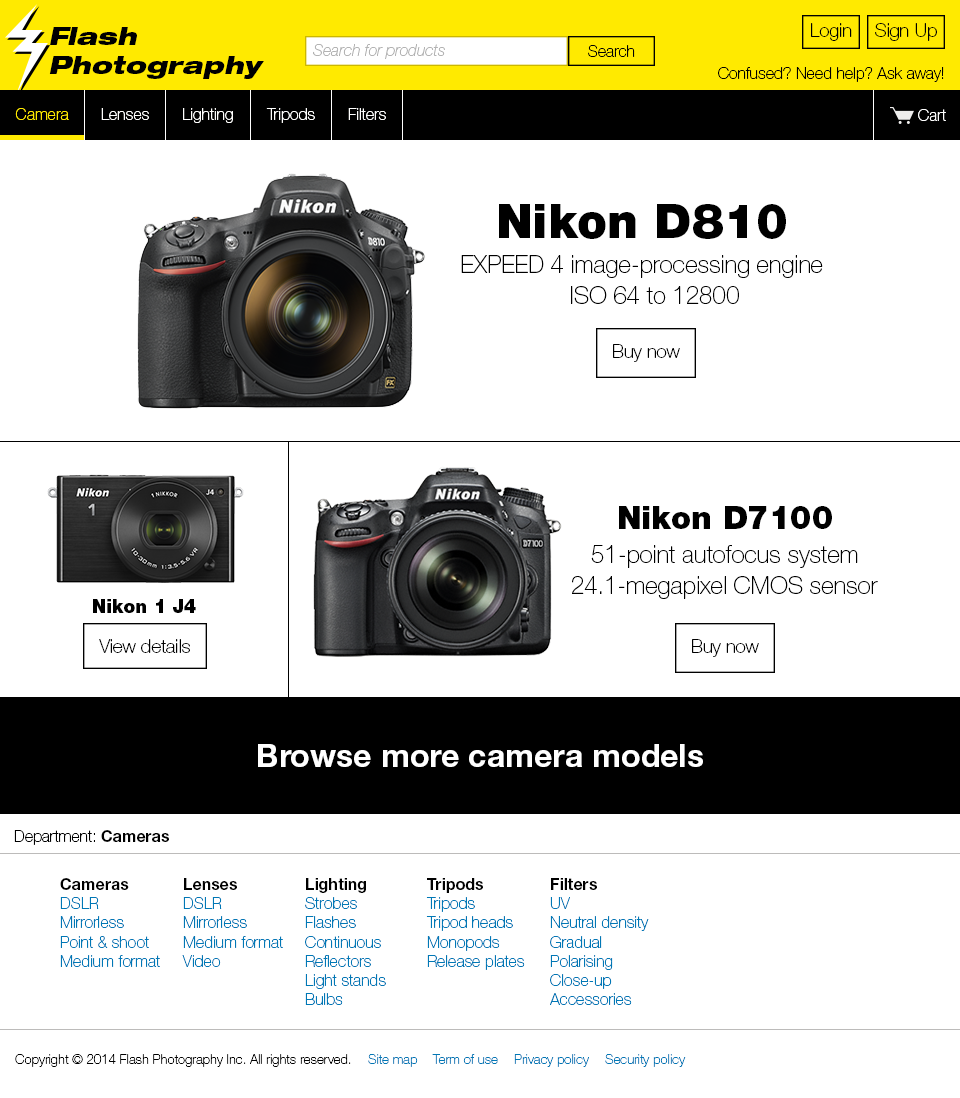
<style>
.page{position:relative;width:960px;height:1098px;background:#ffffff}
.page>*{position:absolute;margin:0}
.t1{font:24px "HelveticaNeueLTStd-BlkExO";color:#000000}
.t2{font:18.7px "HelveticaNeueLTStd-Th";color:#000000}
.t3{font:12px "HelveticaNeueLTStd-ThIt";color:#b3b3b3}
.t4{font:12px "HelveticaNeueLTStd-Th";color:#010101}
.t5{font:16px "HelveticaNeueLTStd-Th";color:#000000}
.t6{font:12px "HelveticaNeueLTStd-Th";color:#ffea00}
.t7{font:12px "HelveticaNeueLTStd-Th";color:#fffffe}
.t8{font:12px "HelveticaNeueLTStd-Th";color:#ffffff}
.t9{font:48px "HelveticaNeueLTStd-Blk";color:#000000}
.t10{font:24px "HelveticaNeueLTStd-Th";color:#000000}
.t11{font:32px "HelveticaNeueLTStd-Blk";color:#000000}
.t12{font:18.7px "HelveticaNeueLTStd-Blk";color:#000000}
.t13{font:32px "HelveticaNeueLTStd-Bd";color:#ffffff}
.t14{font:12px "HelveticaNeueLTStd-Th";color:#000000}
.t15{font:12px "HelveticaNeueLTStd-Bd";color:#000000}
.t16{font:16px "HelveticaNeueLTStd-Th";color:#0078b6}
.t17{font:16px "HelveticaNeueLTStd-Bd";color:#000000}
.t18{font:13.3px "HelveticaNeueLTStd-Th";color:#000000}
.t19{font:13.3px "HelveticaNeueLTStd-Th";color:#0078b6}
</style>
<div class="page">
<p class="t1" style="left:49px;top:27px;width:215px;height:52px">Flash<br>Photography</p>
<p class="t2" style="left:811px;top:23px;width:41px;height:18px">Login</p>
<p class="t2" style="left:875px;top:23px;width:62px;height:18px">Sign Up</p>
<p class="t3" style="left:313px;top:44px;width:132px;height:15px">Search for products</p>
<p class="t4" style="left:588px;top:45px;width:47px;height:12px">Search</p>
<p class="t5" style="left:718px;top:67px;width:226px;height:15px">Confused? Need help? Ask away!</p>
<p class="t6" style="left:15px;top:108px;width:54px;height:12px">Camera</p>
<p class="t7" style="left:101px;top:108px;width:48px;height:12px">Lenses</p>
<p class="t7" style="left:183px;top:108px;width:50px;height:15px">Lighting</p>
<p class="t7" style="left:266px;top:108px;width:49px;height:15px">Tripods</p>
<p class="t7" style="left:348px;top:108px;width:38px;height:12px">Filters</p>
<p class="t8" style="left:918px;top:109px;width:28px;height:12px">Cart</p>
<p class="t9" style="left:499px;top:204px;width:287px;height:35px">Nikon D810</p>
<p class="t10" style="left:461px;top:255px;width:362px;height:23px">EXPEED 4 image-processing engine</p>
<p class="t10" style="left:571px;top:286px;width:168px;height:18px">ISO 64 to 12800</p>
<p class="t2" style="left:613px;top:344px;width:67px;height:18px">Buy now</p>
<p class="t11" style="left:619px;top:506px;width:213px;height:23px">Nikon D7100</p>
<p class="t10" style="left:591px;top:545px;width:267px;height:23px">51-point autofocus system</p>
<p class="t10" style="left:572px;top:576px;width:306px;height:23px">24.1-megapixel CMOS sensor</p>
<p class="t12" style="left:93px;top:599px;width:103px;height:14px">Nikon 1 J4</p>
<p class="t2" style="left:99px;top:639px;width:91px;height:14px">View details</p>
<p class="t2" style="left:692px;top:639px;width:67px;height:18px">Buy now</p>
<p class="t13" style="left:258px;top:744px;width:445px;height:23px">Browse more camera models</p>
<p class="t14" style="left:14px;top:830px;width:155px;height:15px">Department: <span class="t15">Cameras</span></p>
<p class="t16" style="left:60px;top:878px;width:100px;height:89px"><span class="t17">Cameras<br></span>DSLR<br>Mirrorless<br>Point &amp; shoot<br>Medium format</p>
<p class="t16" style="left:182px;top:878px;width:101px;height:89px"><span class="t17">Lenses<br></span>DSLR<br>Mirrorless<br>Medium format<br>Video</p>
<p class="t16" style="left:305px;top:878px;width:81px;height:127px"><span class="t17">Lighting<br></span>Strobes<br>Flashes<br>Continuous<br>Reflectors<br>Light stands<br>Bulbs</p>
<p class="t16" style="left:426px;top:878px;width:99px;height:92px"><span class="t17">Tripods<br></span>Tripods<br>Tripod heads<br>Monopods<br>Release plates</p>
<p class="t16" style="left:550px;top:878px;width:99px;height:127px"><span class="t17">Filters<br></span>UV<br>Neutral density<br>Gradual<br>Polarising<br>Close-up<br>Accessories</p>
<p class="t18" style="left:15px;top:1054px;width:336px;height:13px">Copyright © 2014 Flash Photography Inc. All rights reserved.</p>
<p class="t19" style="left:368px;top:1054px;width:50px;height:13px">Site map</p>
<p class="t19" style="left:432px;top:1054px;width:66px;height:10px">Term of use</p>
<p class="t19" style="left:514px;top:1054px;width:75px;height:13px">Privacy policy</p>
<p class="t19" style="left:605px;top:1054px;width:81px;height:13px">Security policy</p>
</div>
